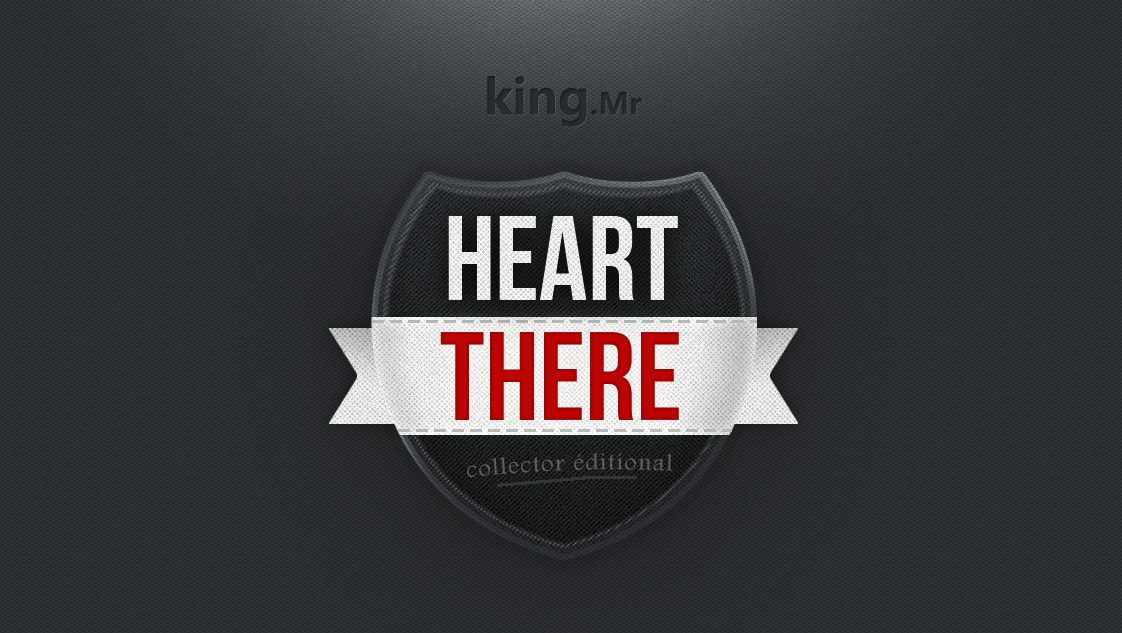
<style>
.page{position:relative;width:1122px;height:633px}
.page>*{position:absolute;margin:0}
.t1{font:48px "MicrosoftYaHei-Bold";color:#292c2e}
.t2{font:30px "MicrosoftYaHei-Bold";color:#292c2e}
.t3{font:120px "BebasNeue"}
.t4{font:126.1px "BebasNeue";color:#bc0404}
.t5{font:24.1px "Andalus";letter-spacing:0.06em;color:#5c5c5b}
</style>
<div class="page">
<p class="t1" style="left:487px;top:76px;width:155px;height:51px">king<span class="t2">.Mr</span></p>
<p class="t3" style="left:448px;top:216px;width:230px;height:84px">heart</p>
<p class="t4" style="left:440px;top:332px;width:239px;height:88px">there</p>
<p class="t5" style="left:467px;top:452px;width:205px;height:26px;rotate:-2deg">collector éditional</p>
</div>
